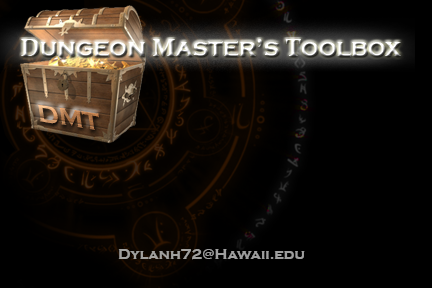
<style>
.page{position:relative;width:432px;height:288px;background:#000000}
.page>*{position:absolute;margin:0}
.t1{font:25px "CopperplateGothic-Bold"}
.t2{font:25px "Constantia-Bold"}
.t3{font:25.8px "CopperplateGothic-Bold"}
.t4{font:15px "CopperplateGothic-Bold";color:#9f9f9e}
</style>
<div class="page">
<p class="t1" style="left:21px;top:39px;width:380px;height:18px"><span class="t2">D</span>ungeon <span class="t2">M</span>aster’s <span class="t2">T</span>oolbox</p>
<p class="t3" style="left:37px;top:104px;width:62px;height:26px;rotate:10deg">DMT</p>
<p class="t4" style="left:118px;top:249px;width:187px;height:11px">Dylanh72@Hawaii.edu</p>
</div>
